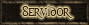
<style>
.page{position:relative;width:89px;height:25px}
.page>*{position:absolute;margin:0}
.t1{font:13px "Morpheus";color:#331e03}
</style>
<div class="page">
<p class="t1" style="left:22px;top:6px;width:51px;height:12px">Servidor</p>
</div>
